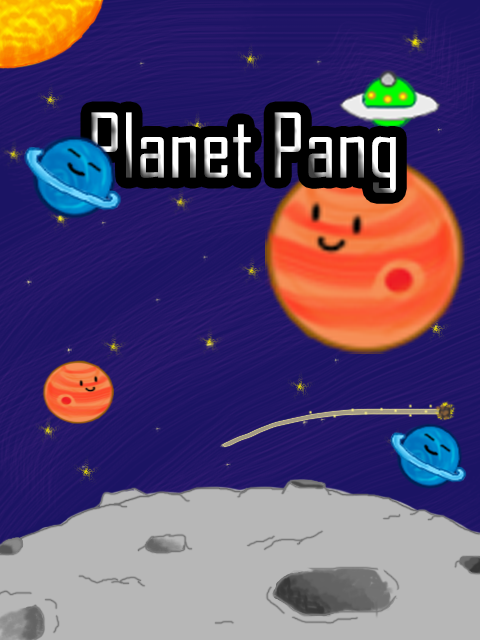
<style>
.page{position:relative;width:480px;height:640px}
.page>*{position:absolute;margin:0}
.t1{font:84.7px "AgencyFB-Reg"}
</style>
<div class="page">
<p class="t1" style="left:91px;top:112px;width:305px;height:81px">Planet Pang</p>
</div>
